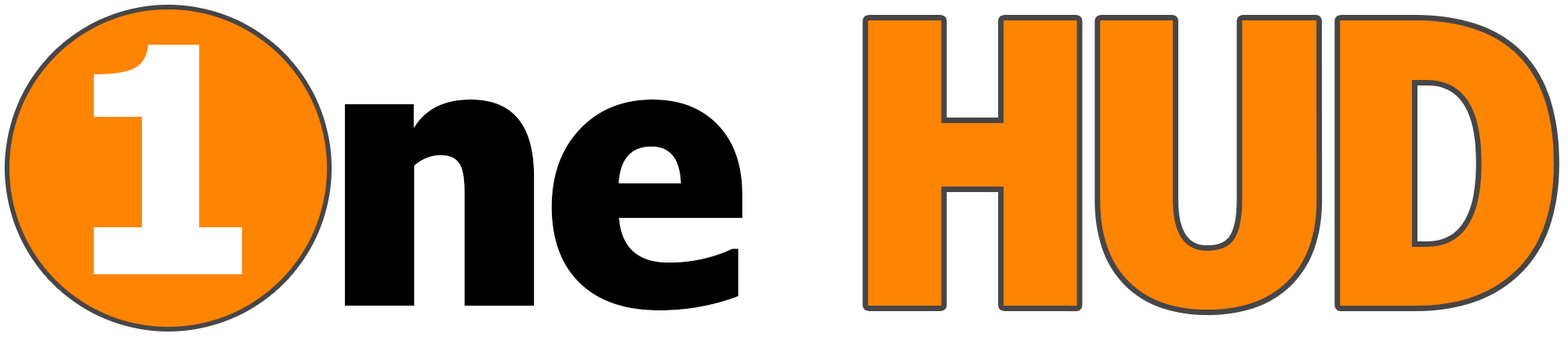
<style>
.page{position:relative;width:1568px;height:337px;background:#ffffff}
.page>*{position:absolute;margin:0}
.t1{font:392px "VerdanaPro-CondBold";letter-spacing:-0.05em;color:#ff8400;text-transform:uppercase}
.t2{font:313.6px "VerdanaPro-CondBold";letter-spacing:-0.025em;color:#ffffff}
.t3{font:392px "VerdanaPro-CondBold";letter-spacing:-0.025em;color:#000000}
</style>
<div class="page">
<p class="t1" style="left:868px;top:20px;width:686px;height:290px">HUD</p>
<p class="t2" style="left:93px;top:45px;width:149px;height:229px">1</p>
<p class="t3" style="left:344px;top:100px;width:398px;height:210px">ne</p>
</div>
